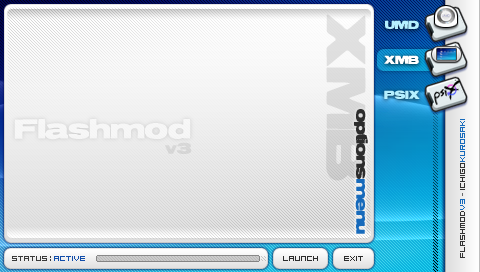
<style>
.page{position:relative;width:480px;height:272px}
.page>*{position:absolute;margin:0}
.t1{font:48px "ReservoirGrunge";color:#d9d9d9}
.t2{font:10px "ReservoirGrunge";color:#b5efff}
.t3{font:10px "ReservoirGrunge";color:#ffffff}
.t4{font:7px "PixelEx";color:#333333}
.t5{font:7px "PixelEx";color:#176abb}
.t6{font:7px "PixelEx";color:#6b6b6b}
.t7{font:7px "PixelEx";color:#114daa}
.t8{font:7px "PixelEx";color:#2d2d2d}
</style>
<div class="page">
<p class="t1" style="left:326px;top:14px;width:40px;height:167px;rotate:90deg">XMB</p>
<p class="t2" style="left:385px;top:20px;width:34px;height:9px">UMD</p>
<p class="t3" style="left:384px;top:55px;width:35px;height:9px">XMB</p>
<p class="t2" style="left:384px;top:90px;width:36px;height:9px">PSIX</p>
<p class="t4" style="left:460px;top:119px;width:5px;height:139px;rotate:-90deg">flashmod<span class="t5">v3</span><span class="t6"> - </span>ichigo<span class="t5">kurosaki</span></p>
<p class="t7" style="left:54px;top:256px;width:31px;height:5px">active</p>
<p class="t8" style="left:283px;top:256px;width:35px;height:5px">launch</p>
<p class="t8" style="left:344px;top:256px;width:19px;height:5px">exit</p>
</div>
